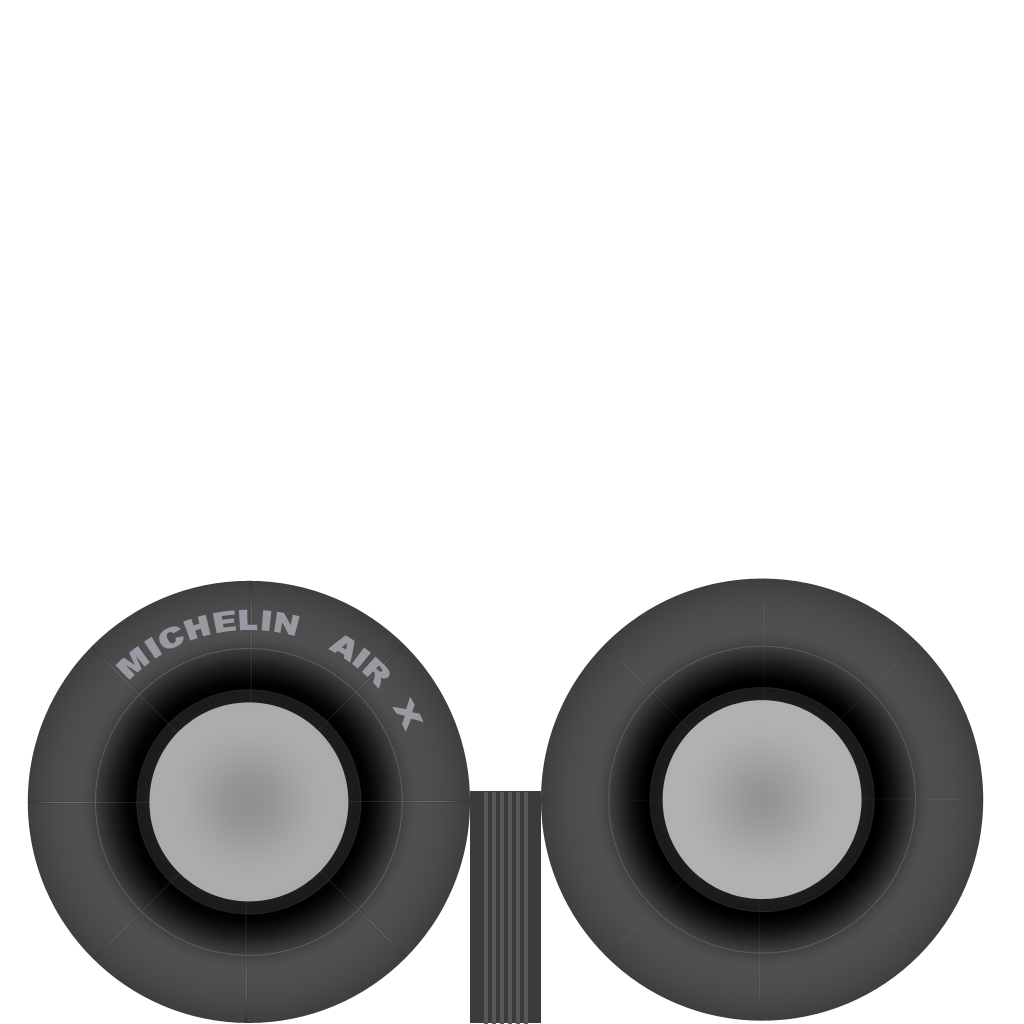
<style>
.page{position:relative;width:1024px;height:1024px;background:#ffffff}
.page>*{position:absolute;margin:0}
.t1{font:27px "Arial-Black";color:#9899a1}
</style>
<div class="page">
<p class="t1" style="left:115px;top:609px;width:309px;height:123px;rotate:10deg">MICHELIN   AIR  X</p>
</div>
